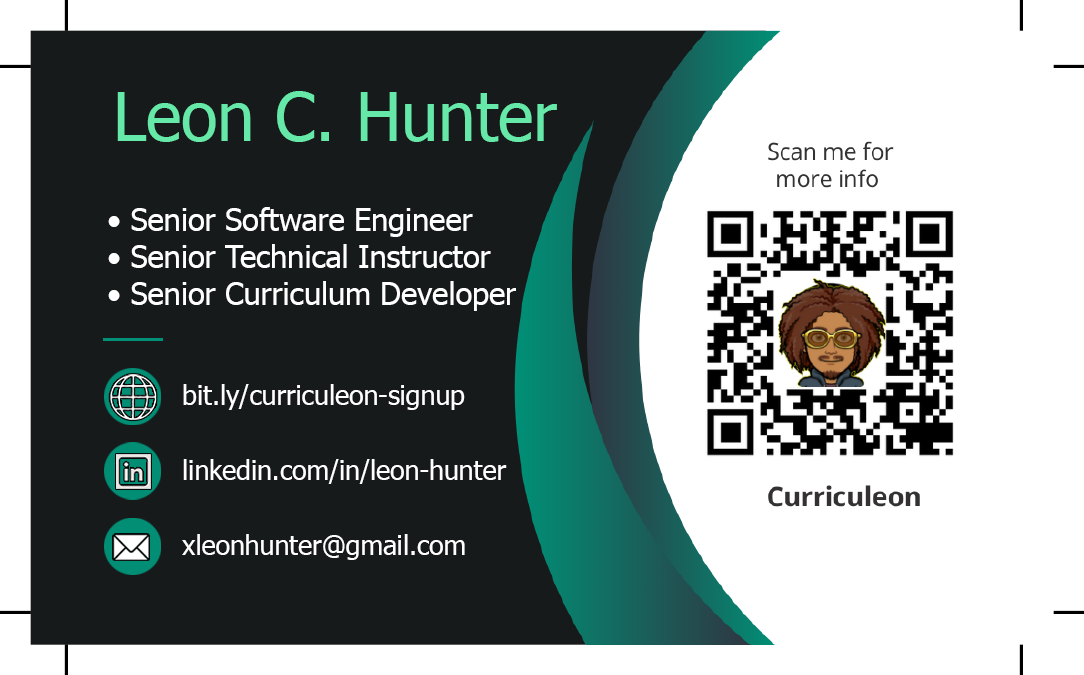
<style>
.page{position:relative;width:1084px;height:675px;background:#ffffff}
.page>*{position:absolute;margin:0}
.t1{font:66.7px "Tahoma";color:#66e9a8}
.t2{font:7.4px "Tahoma";color:#ffffff}
.t3{font:26.5px "Tahoma";color:#ffffff}
</style>
<div class="page">
<p class="t1" style="left:117px;top:91px;width:440px;height:51px">Leon C. Hunter</p>
<p class="t2" style="left:108px;top:207px;width:408px;height:104px">• Senior Software Engineer<br>• Senior Technical Instructor<br>• Senior Curriculum Developer</p>
<p class="t3" style="left:183px;top:384px;width:282px;height:26px">bit.ly/curriculeon-signup</p>
<p class="t3" style="left:183px;top:459px;width:324px;height:25px">linkedin.com/in/leon-hunter</p>
<p class="t3" style="left:182px;top:534px;width:283px;height:26px">xleonhunter@gmail.com</p>
</div>
